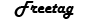
<style>
.page{position:relative;width:108px;height:19px;background:#ffffff}
.page>*{position:absolute;margin:0}
.t1{font:18px "HarlowSolid";color:#000000}
</style>
<div class="page">
<p class="t1" style="left:14px;top:1px;width:60px;height:18px">Freetag</p>
</div>
